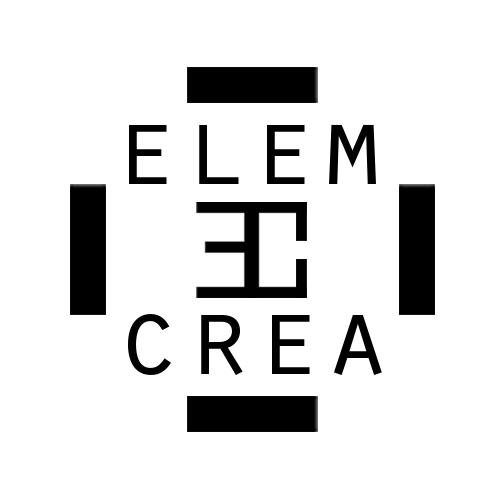
<style>
.page{position:relative;width:500px;height:500px;background:#ffffff}
.page>*{position:absolute;margin:0}
.t1{font:113px "OratorStd";color:#000000}
</style>
<div class="page">
<p class="t1" style="left:129px;top:124px;width:247px;height:60px">elem</p>
<p class="t1" style="left:128px;top:314px;width:254px;height:61px">crea</p>
</div>
